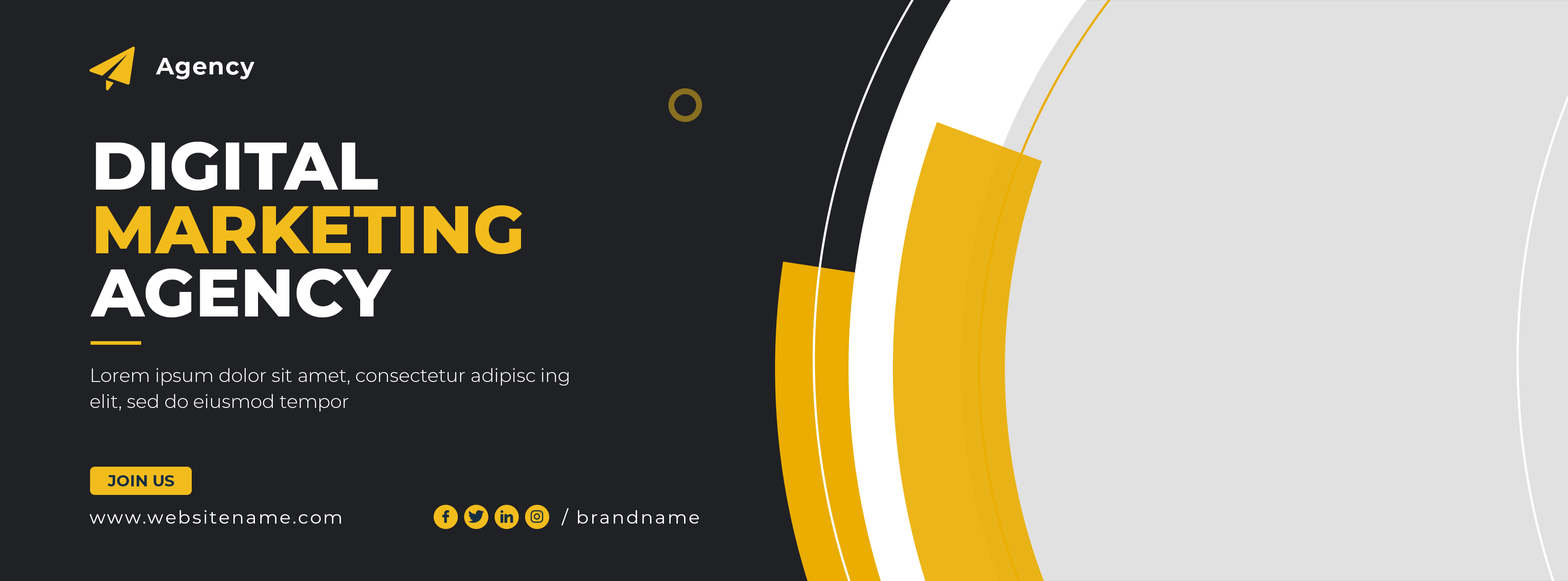
<style>
.page{position:relative;width:1568px;height:581px;background:#202125}
.page>*{position:absolute;margin:0}
.t1{font:67.2px/63.5px "Montserrat-ExtraBold";color:#f2bc1c;text-transform:uppercase}
.t2{font:67.2px/63.5px "Montserrat-ExtraBold";color:#ffffff;text-transform:uppercase}
.t3{font:18.7px/26.1px "Montserrat-Light";color:#ffffff}
.t4{font:15.7px "Montserrat-Bold";color:#162e42;text-transform:uppercase}
.t5{font:18.3px "Montserrat-Regular";letter-spacing:0.1em;color:#ffffff}
</style>
<div class="page">
<p class="t1" style="left:90px;top:142px;width:432px;height:175px"><span class="t2">Digital<br></span>Marketing<br><span class="t2">Agency</span></p>
<p class="t3" style="left:90px;top:368px;width:479px;height:43px">Lorem ipsum dolor sit amet, consectetur adipisc ing elit, sed do eiusmod tempor</p>
<p class="t4" style="left:108px;top:475px;width:66px;height:11px">join us</p>
<p class="t5" style="left:90px;top:510px;width:251px;height:13px">www.websitename.com</p>
<p class="t5" style="left:561px;top:508px;width:138px;height:17px">/ brandname</p>
</div>
